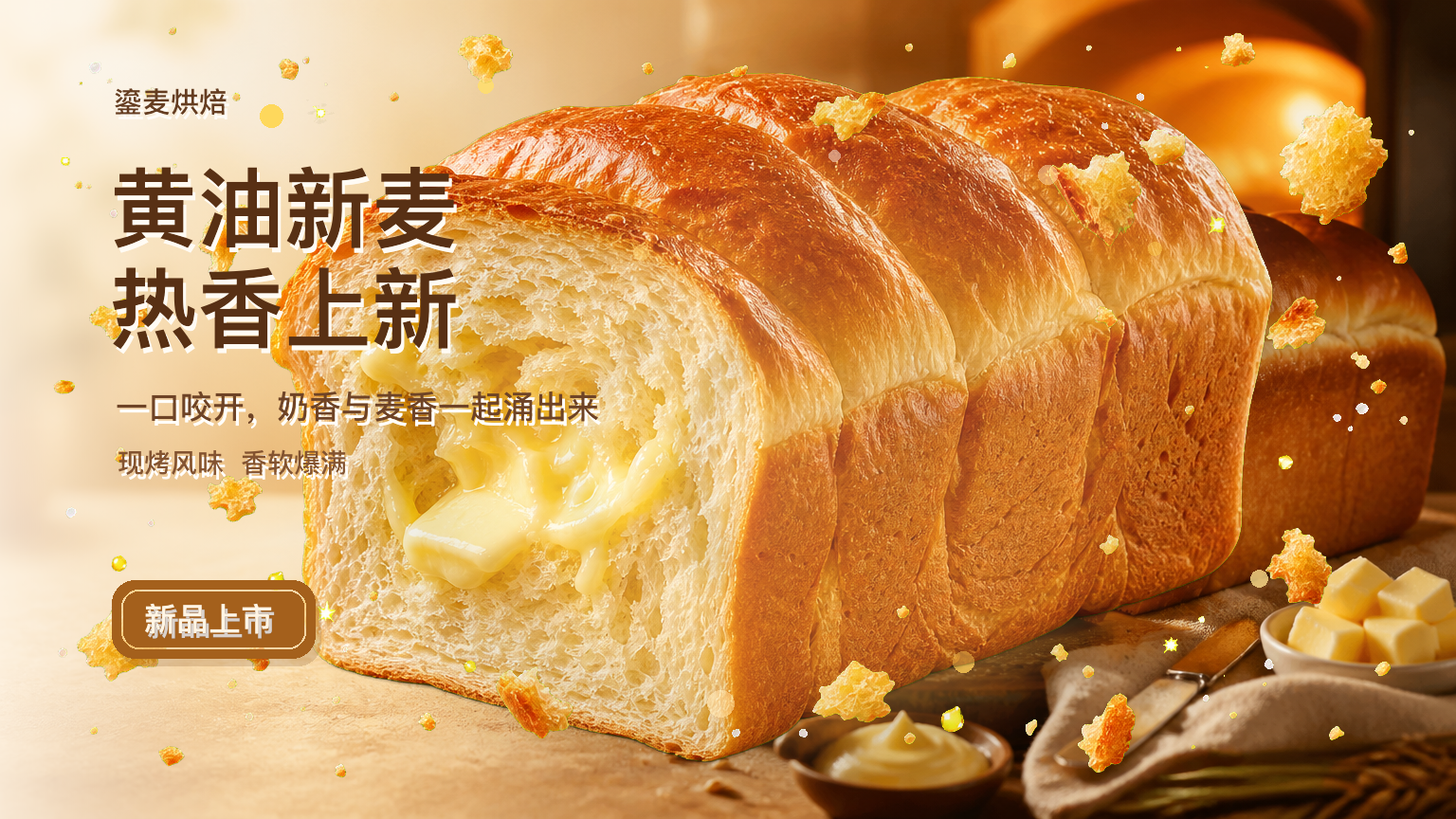
<style>
.page{position:relative;width:1456px;height:819px}
.page>*{position:absolute;margin:0}
.t1{font:28.4px "PingFangSC-Medium";color:#653d21}
.t2{font:87.2px "PingFangSC-Semibold";color:#583014}
.t3{font:32.2px "PingFangSC-Medium";color:#6e4326}
.t4{font:26.5px "PingFangSC-Medium";color:#835330}
.t5{font:32.2px "PingFangSC-Semibold";color:#fff5e5}
</style>
<div class="page">
<p class="t1" style="left:115px;top:88px;width:114px;height:32px">鎏麦烘焙</p>
<p class="t2" style="left:112px;top:166px;width:347px;height:189px">黄油新麦<br>热香上新</p>
<p class="t3" style="left:117px;top:391px;width:484px;height:38px">一口咬开，奶香与麦香一起涌出来</p>
<p class="t4" style="left:118px;top:449px;width:231px;height:31px">现烤风味  香软爆满</p>
<p class="t5" style="left:145px;top:603px;width:130px;height:36px">新品上市</p>
</div>
